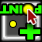
<style>
.page{position:relative;width:42px;height:42px}
.page>*{position:absolute;margin:0}
.t1{font:11.2px "Arial-Black";letter-spacing:-0.075em;color:#24fd00;scale:1.19 1}
.t2{font:28.8px "Arial-Black";letter-spacing:-0.075em;color:#24ff00;scale:1.3 1}
</style>
<div class="page">
<p class="t1" style="left:0px;top:5px;width:42px;height:9px;rotate:-180deg">POINT</p>
<p class="t2" style="left:20px;top:24px;width:21px;height:16px;rotate:-180deg">+</p>
</div>
